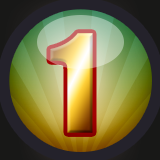
<style>
.page{position:relative;width:160px;height:160px}
.page>*{position:absolute;margin:0}
.t1{font:125.5px "Impact"}
</style>
<div class="page">
<p class="t1" style="left:50px;top:33px;width:43px;height:100px">1</p>
</div>
